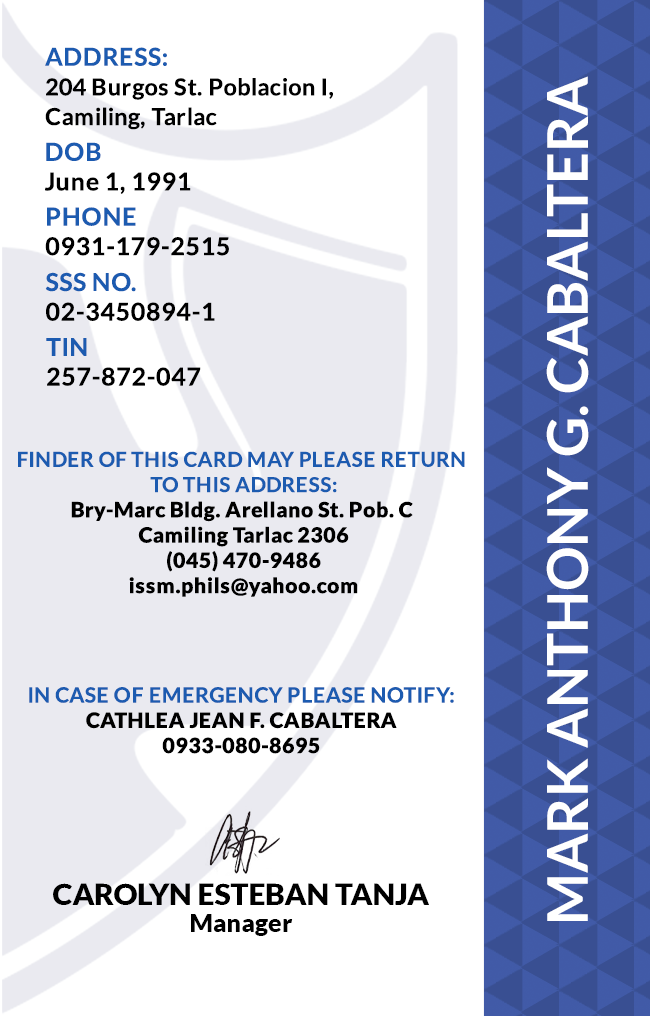
<style>
.page{position:relative;width:650px;height:1016px;background:#ffffff}
.page>*{position:absolute;margin:0}
.t1{font:23.3px/29.6px "Lato-Bold";letter-spacing:0.025em;color:#000000}
.t2{font:24.7px/29.6px "Lato-Bold";letter-spacing:0.025em;color:#1c5bb0}
.t3{font:56.2px "Lato-Bold";color:#ffffff}
.t4{font:24.7px/29.6px "Lato-Bold";letter-spacing:0.025em;color:#000000}
.t5{font:21.1px "Lato-Black";letter-spacing:0.025em}
.t6{font:20.5px/25.3px "Lato-Bold";letter-spacing:0.025em;text-transform:uppercase}
.t7{font:21.1px/25.3px "Lato-Bold";letter-spacing:0.025em}
.t8{font:29.5px "Lato-Black";color:#000000}
.t9{font:25px "Lato-Black";color:#000000}
</style>
<div class="page">
<p class="t1" style="left:45px;top:47px;width:288px;height:83px"><span class="t2">ADDRESS:<br></span>204 Burgos St. Poblacion I, <br>Camiling, Tarlac</p>
<p class="t3" style="left:546px;top:76px;width:43px;height:845px;rotate:-90deg">MARK ANTHONY G. CABALTERA</p>
<p class="t4" style="left:45px;top:142px;width:146px;height:52px"><span class="t2">DOB<br></span>June 1, 1991</p>
<p class="t4" style="left:45px;top:207px;width:184px;height:49px"><span class="t2">PHONE <br></span>0931-179-2515</p>
<p class="t4" style="left:45px;top:272px;width:170px;height:49px"><span class="t2">SSS NO.<br></span>02-3450894-1</p>
<p class="t4" style="left:46px;top:338px;width:155px;height:48px"><span class="t2">TIN<br></span>257-872-047</p>
<p class="t5" style="left:18px;top:451px;width:447px;height:146px;text-align:center"><span class="t6">Finder of this card may please return <br>to this address:<br></span>Bry-Marc Bldg. Arellano St. Pob. C <br>Camiling Tarlac 2306<br>(045) 470-9486<br>issm.phils@yahoo.com</p>
<p class="t5" style="left:29px;top:687px;width:425px;height:67px;text-align:center"><span class="t7">IN CASE OF EMERGENCY PLEASE NOTIFY:<br></span>CATHLEA JEAN F. CABALTERA<br>0933-080-8695</p>
<p class="t8" style="left:53px;top:883px;width:376px;height:22px">CAROLYN ESTEBAN TANJA</p>
<p class="t9" style="left:191px;top:914px;width:102px;height:22px">Manager</p>
</div>
